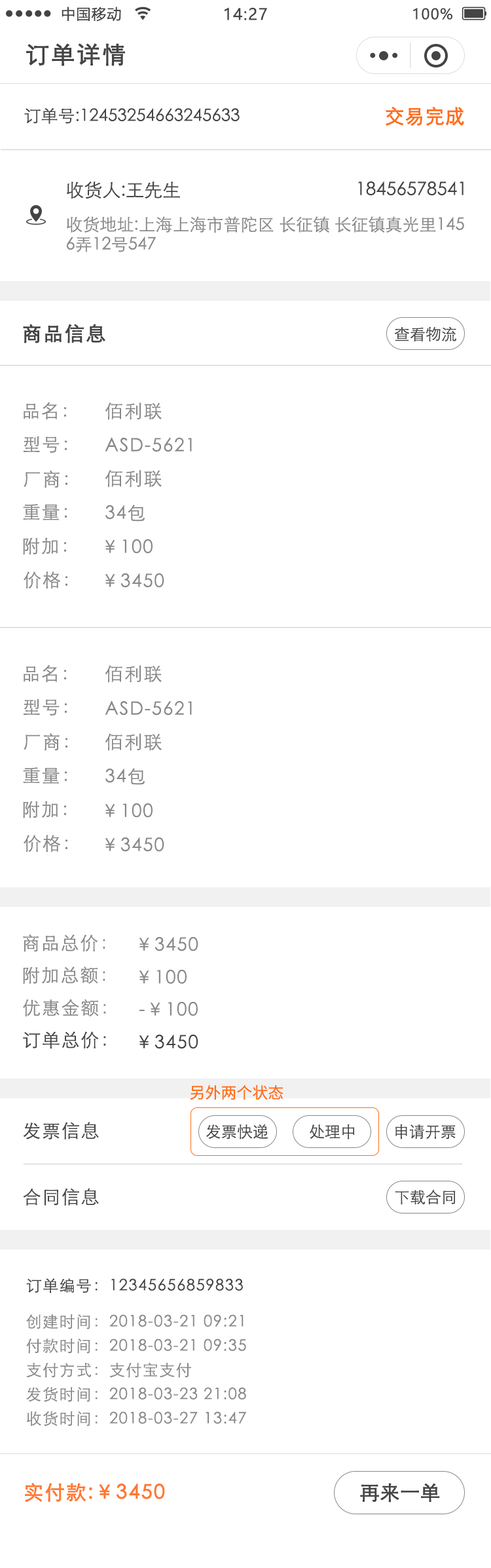
<style>
.page{position:relative;width:491px;height:1568px;background:#ffffff}
.page>*{position:absolute;margin:0}
.t1{font:14.4px "MicrosoftYaHei";letter-spacing:0.06em;color:#444444}
.t2{font:15.7px "MicrosoftYaHei";letter-spacing:0.06em;color:#444444}
.t3{font:23.6px "STXihei";letter-spacing:0.06em;color:#444444;font-weight:bold}
.t4{font:17px "STXihei";color:#444444}
.t5{font:19.7px "STXihei";color:#ff6e17;font-weight:bold}
.t6{font:18.3px "STXihei";color:#444444}
.t7{font:17px/19.7px "STXihei";color:#888888}
.t8{font:19.7px "STXihei";letter-spacing:0.06em;color:#444444;font-weight:bold}
.t9{font:15.7px "STXihei";color:#444444}
.t10{font:18.3px "STXihei";letter-spacing:0.06em;color:#888888}
.t11{font:18.3px "STXihei";letter-spacing:0.06em;color:#444444}
.t12{font:15.7px "NotoSansCJKsc-Regular";color:#ff6e17}
.t13{font:15.7px "STXihei";letter-spacing:0.06em;color:#444444}
.t14{font:15.7px "STXihei";letter-spacing:0.06em;color:#888888}
.t15{font:19.7px "STXihei";letter-spacing:0.06em;color:#ff782f;font-weight:bold}
.t16{font:19.7px "STXihei";color:#444444;font-weight:bold}
</style>
<div class="page">
<p class="t1" style="left:62px;top:7px;width:59px;height:15px">中国移动</p>
<p class="t2" style="left:225px;top:7px;width:42px;height:13px">14:27</p>
<p class="t1" style="left:413px;top:8px;width:40px;height:12px">100%</p>
<p class="t3" style="left:26px;top:43px;width:99px;height:23px">订单详情</p>
<p class="t4" style="left:24px;top:107px;width:216px;height:17px">订单号:12453254663245633</p>
<p class="t5" style="left:386px;top:106px;width:79px;height:20px">交易完成</p>
<p class="t6" style="left:67px;top:181px;width:113px;height:18px">收货人:王先生</p>
<p class="t6" style="left:358px;top:181px;width:106px;height:15px">18456578541</p>
<p class="t7" style="left:66px;top:216px;width:399px;height:36px">收货地址:上海上海市普陀区 长征镇 长征镇真光里145<br>6弄12号547</p>
<p class="t8" style="left:23px;top:324px;width:82px;height:19px">商品信息</p>
<p class="t9" style="left:394px;top:326px;width:63px;height:16px">查看物流</p>
<p class="t10" style="left:24px;top:402px;width:42px;height:17px">品名：</p>
<p class="t10" style="left:105px;top:402px;width:57px;height:18px">佰利联</p>
<p class="t10" style="left:24px;top:436px;width:43px;height:17px">型号：</p>
<p class="t10" style="left:105px;top:437px;width:87px;height:15px">ASD-5621</p>
<p class="t10" style="left:24px;top:470px;width:43px;height:18px">厂商：</p>
<p class="t10" style="left:105px;top:470px;width:57px;height:18px">佰利联</p>
<p class="t10" style="left:23px;top:504px;width:44px;height:16px">重量：</p>
<p class="t10" style="left:105px;top:505px;width:40px;height:17px">34包</p>
<p class="t10" style="left:23px;top:537px;width:43px;height:18px">附加：</p>
<p class="t10" style="left:105px;top:539px;width:48px;height:15px">￥100</p>
<p class="t10" style="left:24px;top:571px;width:43px;height:17px">价格：</p>
<p class="t10" style="left:105px;top:573px;width:59px;height:15px">￥3450</p>
<p class="t10" style="left:24px;top:664px;width:42px;height:18px">品名：</p>
<p class="t10" style="left:105px;top:665px;width:57px;height:18px">佰利联</p>
<p class="t10" style="left:24px;top:698px;width:43px;height:18px">型号：</p>
<p class="t10" style="left:105px;top:700px;width:87px;height:16px">ASD-5621</p>
<p class="t10" style="left:24px;top:733px;width:43px;height:18px">厂商：</p>
<p class="t10" style="left:105px;top:733px;width:57px;height:18px">佰利联</p>
<p class="t10" style="left:23px;top:767px;width:44px;height:17px">重量：</p>
<p class="t10" style="left:105px;top:768px;width:40px;height:17px">34包</p>
<p class="t10" style="left:23px;top:801px;width:43px;height:17px">附加：</p>
<p class="t10" style="left:105px;top:803px;width:48px;height:15px">￥100</p>
<p class="t10" style="left:24px;top:835px;width:43px;height:17px">价格：</p>
<p class="t10" style="left:105px;top:837px;width:59px;height:15px">￥3450</p>
<p class="t10" style="left:23px;top:934px;width:82px;height:18px">商品总价：</p>
<p class="t10" style="left:139px;top:937px;width:60px;height:14px">￥3450</p>
<p class="t10" style="left:23px;top:966px;width:82px;height:18px">附加总额：</p>
<p class="t10" style="left:139px;top:970px;width:48px;height:14px">￥100</p>
<p class="t10" style="left:23px;top:999px;width:83px;height:18px">优惠金额：</p>
<p class="t10" style="left:140px;top:1002px;width:58px;height:14px">-￥100</p>
<p class="t11" style="left:23px;top:1031px;width:83px;height:18px">订单总价：</p>
<p class="t11" style="left:139px;top:1035px;width:60px;height:14px">￥3450</p>
<p class="t12" style="left:190px;top:1085px;width:94px;height:15px">另外两个状态</p>
<p class="t11" style="left:23px;top:1122px;width:76px;height:17px">发票信息</p>
<p class="t9" style="left:206px;top:1124px;width:62px;height:15px">发票快递</p>
<p class="t9" style="left:310px;top:1124px;width:44px;height:15px">处理中</p>
<p class="t9" style="left:396px;top:1124px;width:60px;height:15px">申请开票</p>
<p class="t11" style="left:23px;top:1188px;width:76px;height:18px">合同信息</p>
<p class="t9" style="left:396px;top:1189px;width:60px;height:16px">下载合同</p>
<p class="t13" style="left:26px;top:1278px;width:217px;height:15px">订单编号：12345656859833</p>
<p class="t14" style="left:26px;top:1314px;width:218px;height:15px">创建时间：2018-03-21 09:21</p>
<p class="t14" style="left:26px;top:1338px;width:220px;height:16px">付款时间：2018-03-21 09:35</p>
<p class="t14" style="left:26px;top:1362px;width:165px;height:16px">支付方式：支付宝支付</p>
<p class="t14" style="left:26px;top:1386px;width:220px;height:16px">发货时间：2018-03-23 21:08</p>
<p class="t14" style="left:27px;top:1411px;width:219px;height:15px">收货时间：2018-03-27 13:47</p>
<p class="t15" style="left:25px;top:1483px;width:140px;height:19px">实付款:￥3450</p>
<p class="t16" style="left:360px;top:1483px;width:80px;height:19px">再来一单</p>
</div>
